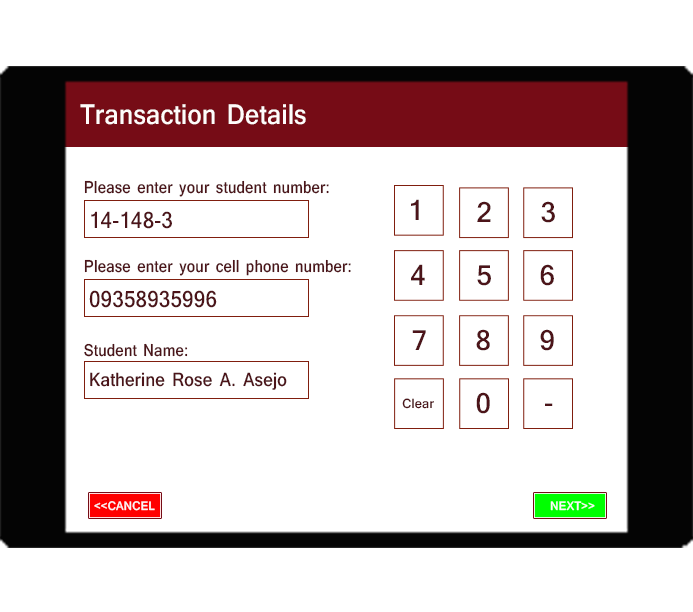
<style>
.page{position:relative;width:693px;height:612px;background:#ffffff}
.page>*{position:absolute;margin:0}
.t1{font:29.9px "Shruti-Bold";letter-spacing:0.01em;color:#fffcfb;scale:0.89 1}
.t2{font:18px "Shruti-Bold";letter-spacing:0.01em;color:#4c1419;scale:0.88 1}
.t3{font:30.1px "Shruti-Bold";letter-spacing:0.01em;color:#4c1419;scale:0.97 1}
.t4{font:24.2px "Shruti-Bold";letter-spacing:0.01em;color:#4c1419;scale:0.89 1}
.t5{font:19.9px "Shruti-Bold";letter-spacing:0.01em;color:#4c1419;scale:0.9 1}
.t6{font:14px "Shruti-Bold";letter-spacing:0.01em;color:#4c1419;scale:0.97 1}
.t7{font:13px "Shruti-Bold";letter-spacing:0.01em;color:#faf7f7;scale:0.95 1}
.t8{font:13px "Shruti-Bold";letter-spacing:0.01em;color:#fcf9f9;scale:0.95 1}
</style>
<div class="page">
<p class="t1" style="left:80px;top:104px;width:226px;height:21px">Transaction Details</p>
<p class="t2" style="left:84px;top:180px;width:245px;height:17px">Please enter your student number:</p>
<p class="t3" style="left:411px;top:199px;width:8px;height:21px">1</p>
<p class="t3" style="left:477px;top:201px;width:14px;height:21px">2</p>
<p class="t3" style="left:541px;top:201px;width:14px;height:22px">3</p>
<p class="t4" style="left:91px;top:211px;width:81px;height:18px">14-148-3</p>
<p class="t2" style="left:84px;top:259px;width:267px;height:17px">Please enter your cell phone number:</p>
<p class="t3" style="left:411px;top:264px;width:14px;height:21px">4</p>
<p class="t3" style="left:477px;top:265px;width:14px;height:21px">5</p>
<p class="t3" style="left:540px;top:264px;width:14px;height:22px">6</p>
<p class="t4" style="left:89px;top:290px;width:128px;height:18px">09358935996</p>
<p class="t3" style="left:476px;top:329px;width:14px;height:22px">8</p>
<p class="t3" style="left:540px;top:329px;width:14px;height:22px">9</p>
<p class="t3" style="left:412px;top:330px;width:14px;height:20px">7</p>
<p class="t2" style="left:84px;top:343px;width:104px;height:14px">Student Name:</p>
<p class="t5" style="left:90px;top:372px;width:197px;height:18px">Katherine Rose A. Asejo</p>
<p class="t6" style="left:402px;top:398px;width:32px;height:11px">Clear</p>
<p class="t3" style="left:476px;top:392px;width:14px;height:22px">0</p>
<p class="t3" style="left:545px;top:403px;width:8px;height:3px">-</p>
<p class="t7" style="left:94px;top:501px;width:61px;height:10px">&lt;&lt;CANCEL</p>
<p class="t8" style="left:550px;top:501px;width:45px;height:10px">NEXT&gt;&gt;</p>
</div>
